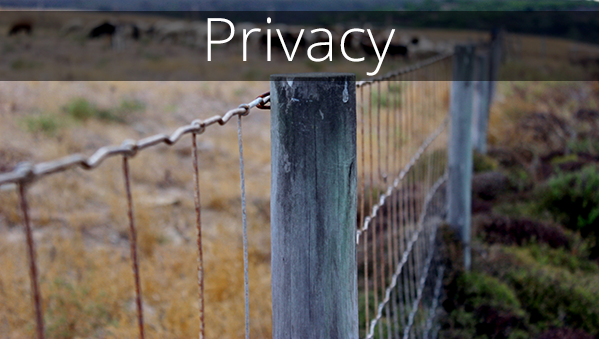
<style>
.page{position:relative;width:599px;height:339px}
.page>*{position:absolute;margin:0}
.t1{font:60px "OpenSans-Light";color:#ffffff;scale:1.03 1}
</style>
<div class="page">
<p class="t1" style="left:207px;top:17px;width:189px;height:59px">Privacy</p>
</div>
